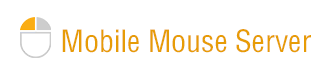
<style>
.page{position:relative;width:322px;height:80px;background:#ffffff}
.page>*{position:absolute;margin:0}
.t1{font:30px "FZYTK--GBK1-0";color:#e79c06}
</style>
<div class="page">
<p class="t1" style="left:62px;top:29px;width:249px;height:24px">Mobile Mouse Server</p>
</div>
